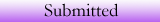
<style>
.page{position:relative;width:160px;height:22px}
.page>*{position:absolute;margin:0}
.t1{font:18.7px "Garamond";color:#000000}
</style>
<div class="page">
<p class="t1" style="left:44px;top:3px;width:75px;height:14px">Submitted</p>
</div>
